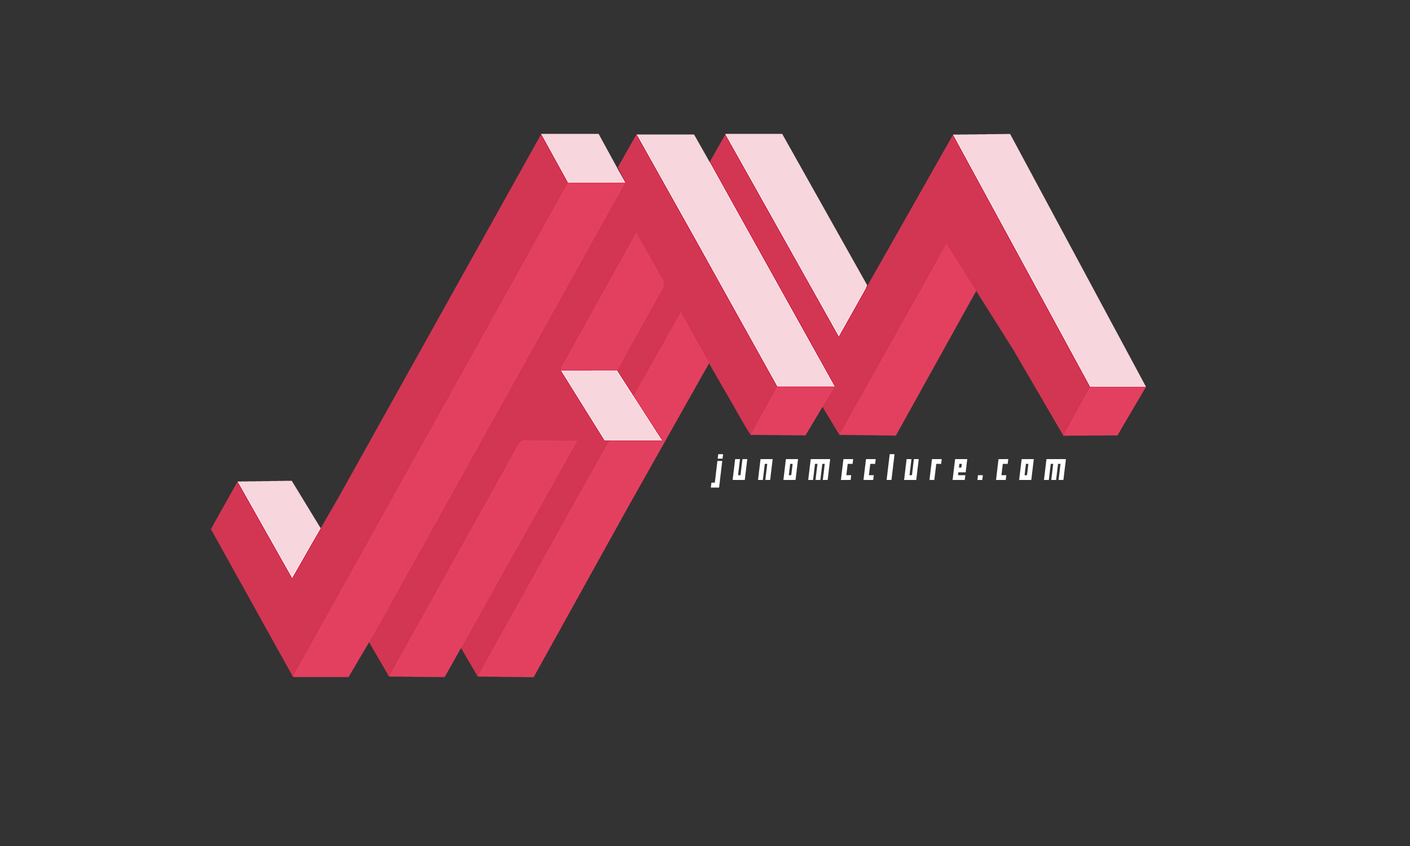
<style>
.page{position:relative;width:1410px;height:846px;background:#333333}
.page>*{position:absolute;margin:0}
.t1{font:31px "Buran-USSR";letter-spacing:0.34em;color:#ffffff}
</style>
<div class="page">
<p class="t1" style="left:711px;top:454px;width:355px;height:34px">junomcclure.com</p>
</div>
